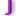
<style>
.page{position:relative;width:16px;height:16px;background:#ffffff}
.page>*{position:absolute;margin:0}
.t1{font:20.5px "Sansation";color:#b13fcd}
.t2{font:20.5px "Sansation";color:#760991}
</style>
<div class="page">
<p class="t1" style="left:4px;top:0px;width:7px;height:15px">J</p>
<p class="t2" style="left:6px;top:0px;width:6px;height:15px">J</p>
</div>
